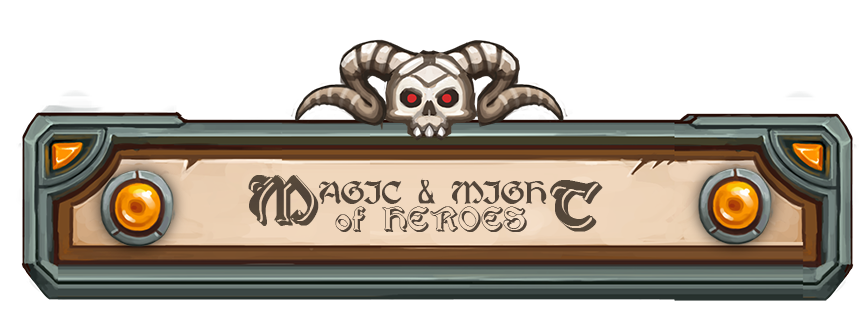
<style>
.page{position:relative;width:859px;height:325px;background:#ffffff}
.page>*{position:absolute;margin:0}
.t1{font:72px "Augusta-Regular";color:#54473a}
.t2{font:72px "Augusta-Shadow";color:#53463a}
.t3{font:36px "Augusta-Regular";color:#524539}
.t4{font:72px "Augusta-Shadow";color:#534639}
.t5{font:36px "Augusta-Shadow";color:#514439}
</style>
<div class="page">
<p class="t1" style="left:248px;top:175px;width:64px;height:46px">M</p>
<p class="t2" style="left:250px;top:175px;width:69px;height:51px">M</p>
<p class="t3" style="left:319px;top:178px;width:228px;height:26px">AGIC &amp; MIGH</p>
<p class="t1" style="left:550px;top:180px;width:47px;height:46px">T</p>
<p class="t4" style="left:551px;top:181px;width:52px;height:51px">T</p>
<p class="t5" style="left:335px;top:206px;width:192px;height:26px">of HEROES</p>
</div>
